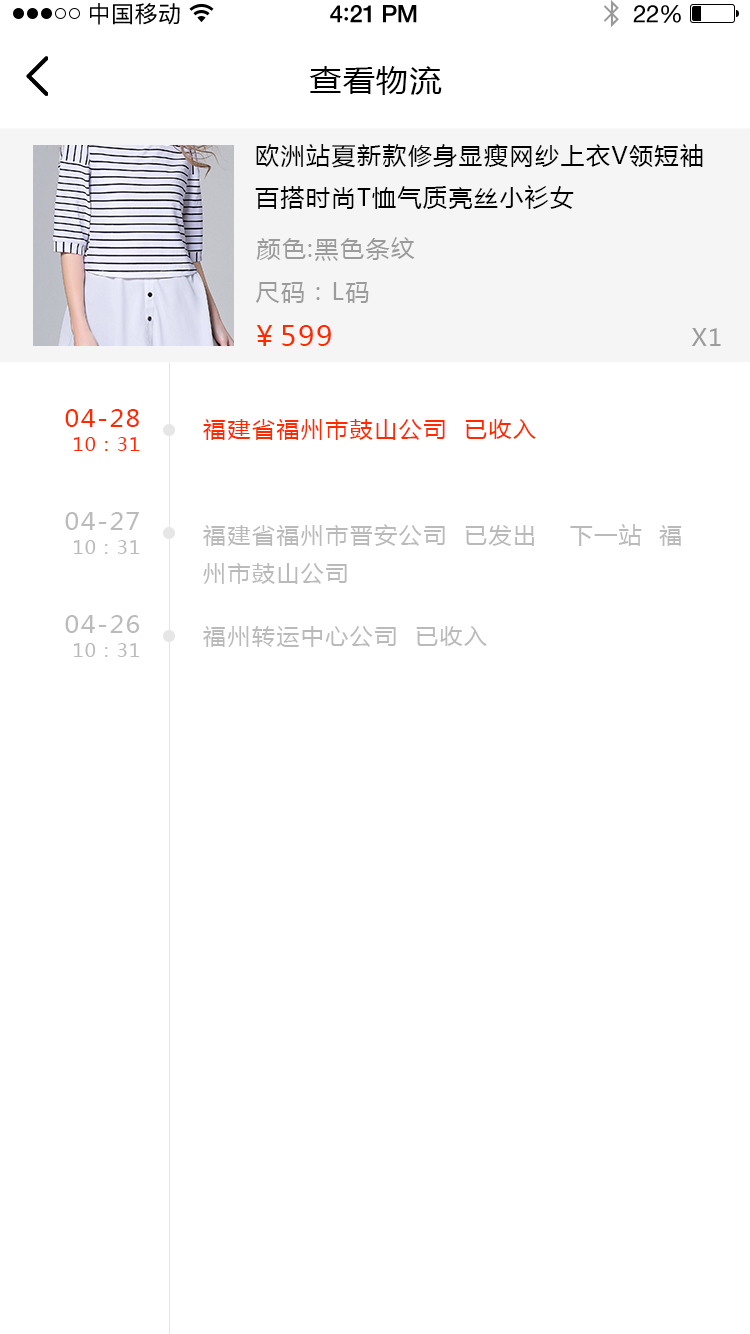
<style>
.page{position:relative;width:750px;height:1334px;background:#ffffff}
.page>*{position:absolute;margin:0}
.t1{font:23px "PingFangSC-Regular";letter-spacing:0.02em;color:#000000}
.t2{font:24px "HelveticaNeue-Medium";letter-spacing:-0.02em;color:#000000}
.t3{font:26px "Avenir-Medium";letter-spacing:-0.02em;color:#000000}
.t4{font:24px "HelveticaNeue";letter-spacing:-0.02em;color:#000000}
.t5{font:30px "MicrosoftYaHei";letter-spacing:0.05em;color:#000000;scale:1.06 1}
.t6{font:24px "MicrosoftYaHei";letter-spacing:0.06em;color:#000000;text-transform:uppercase}
.t7{font:24px "MicrosoftYaHei";letter-spacing:0.06em;color:#9b9b9b;text-transform:uppercase}
.t8{font:28px "MicrosoftYaHei";letter-spacing:0.06em;color:#ff2a00;text-transform:uppercase}
.t9{font:24px "MicrosoftYaHei";letter-spacing:0.05em;color:#ff2a00;scale:1.06 1}
.t10{font:22px "MicrosoftYaHei";letter-spacing:0.05em;color:#ff2a00;scale:1.06 1}
.t11{font:18px "MicrosoftYaHei";letter-spacing:0.05em;color:#ff2a00;scale:1.06 1}
.t12{font:24px "MicrosoftYaHei";letter-spacing:0.05em;color:#bbbbbb;scale:1.06 1}
.t13{font:22px "MicrosoftYaHei";letter-spacing:0.05em;color:#bababa;scale:1.06 1}
.t14{font:18px "MicrosoftYaHei";letter-spacing:0.05em;color:#bbbbbb;scale:1.06 1}
</style>
<div class="page">
<p class="t1" style="left:90px;top:3px;width:90px;height:22px">中国移动</p>
<p class="t2" style="left:330px;top:5px;width:87px;height:18px">4<span class="t3">:</span>21 PM</p>
<p class="t4" style="left:633px;top:5px;width:48px;height:18px">22%</p>
<p class="t5" style="left:309px;top:66px;width:133px;height:29px">查看物流</p>
<p class="t6" style="left:255px;top:144px;width:448px;height:65px">欧洲站夏新款修身显瘦网纱上衣v领短袖百搭时尚t恤气质亮丝小衫女</p>
<p class="t7" style="left:256px;top:237px;width:159px;height:24px">颜色:黑色条纹</p>
<p class="t7" style="left:255px;top:282px;width:114px;height:21px">尺码：L码</p>
<p class="t8" style="left:256px;top:325px;width:75px;height:21px">￥599</p>
<p class="t7" style="left:691px;top:328px;width:30px;height:18px">x1</p>
<p class="t9" style="left:65px;top:409px;width:74px;height:18px">04-28</p>
<p class="t10" style="left:203px;top:419px;width:333px;height:21px">福建省福州市鼓山公司  已收入</p>
<p class="t11" style="left:74px;top:437px;width:66px;height:14px">10：31</p>
<p class="t12" style="left:65px;top:512px;width:74px;height:18px">04-27</p>
<p class="t13" style="left:203px;top:524px;width:479px;height:60px">福建省福州市晋安公司  已发出    下一站  福<br>州市鼓山公司</p>
<p class="t14" style="left:74px;top:540px;width:66px;height:14px">10：31</p>
<p class="t12" style="left:65px;top:615px;width:75px;height:18px">04-26</p>
<p class="t13" style="left:203px;top:626px;width:284px;height:21px">福州转运中心公司  已收入</p>
<p class="t14" style="left:74px;top:643px;width:66px;height:14px">10：31</p>
</div>
